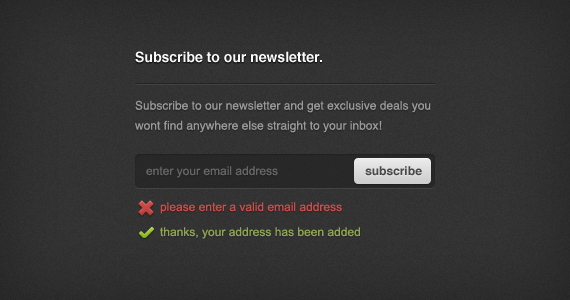
<style>
.page{position:relative;width:570px;height:300px}
.page>*{position:absolute;margin:0}
.t1{font:14px "Helvetica-Bold";color:#f9f9f9}
.t2{font:12px/20px "Helvetica";color:#999999}
.t3{font:12px "ArialMT";color:#666666}
.t4{font:12px "Helvetica-Bold";color:#4a4a4a}
.t5{font:12px "ArialMT";color:#d04c49}
.t6{font:12px "ArialMT";color:#8fa753}
</style>
<div class="page">
<p class="t1" style="left:135px;top:51px;width:187px;height:12px">Subscribe to our newsletter.</p>
<p class="t2" style="left:135px;top:100px;width:296px;height:33px">Subscribe to our newsletter and get exclusive deals you wont find anywhere else straight to your inbox!</p>
<p class="t3" style="left:146px;top:166px;width:132px;height:12px">enter your email address</p>
<p class="t4" style="left:365px;top:166px;width:57px;height:10px">subscribe</p>
<p class="t5" style="left:160px;top:202px;width:182px;height:12px">please enter a valid email address</p>
<p class="t6" style="left:160px;top:227px;width:200px;height:12px">thanks, your address has been added</p>
</div>
